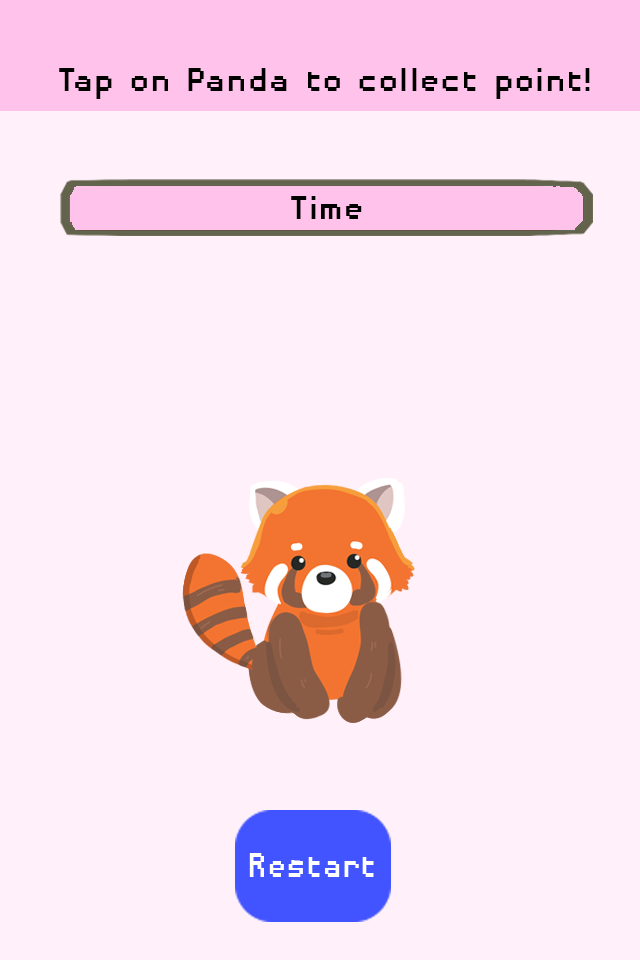
<style>
.page{position:relative;width:640px;height:960px;background:#fff0fa}
.page>*{position:absolute;margin:0}
.t1{font:43px "DisposableDroidBB";color:#000000}
</style>
<div class="page">
<p class="t1" style="left:59px;top:68px;width:531px;height:31px">Tap on Panda to collect point!</p>
<p class="t1" style="left:291px;top:196px;width:71px;height:23px">Time</p>
</div>
